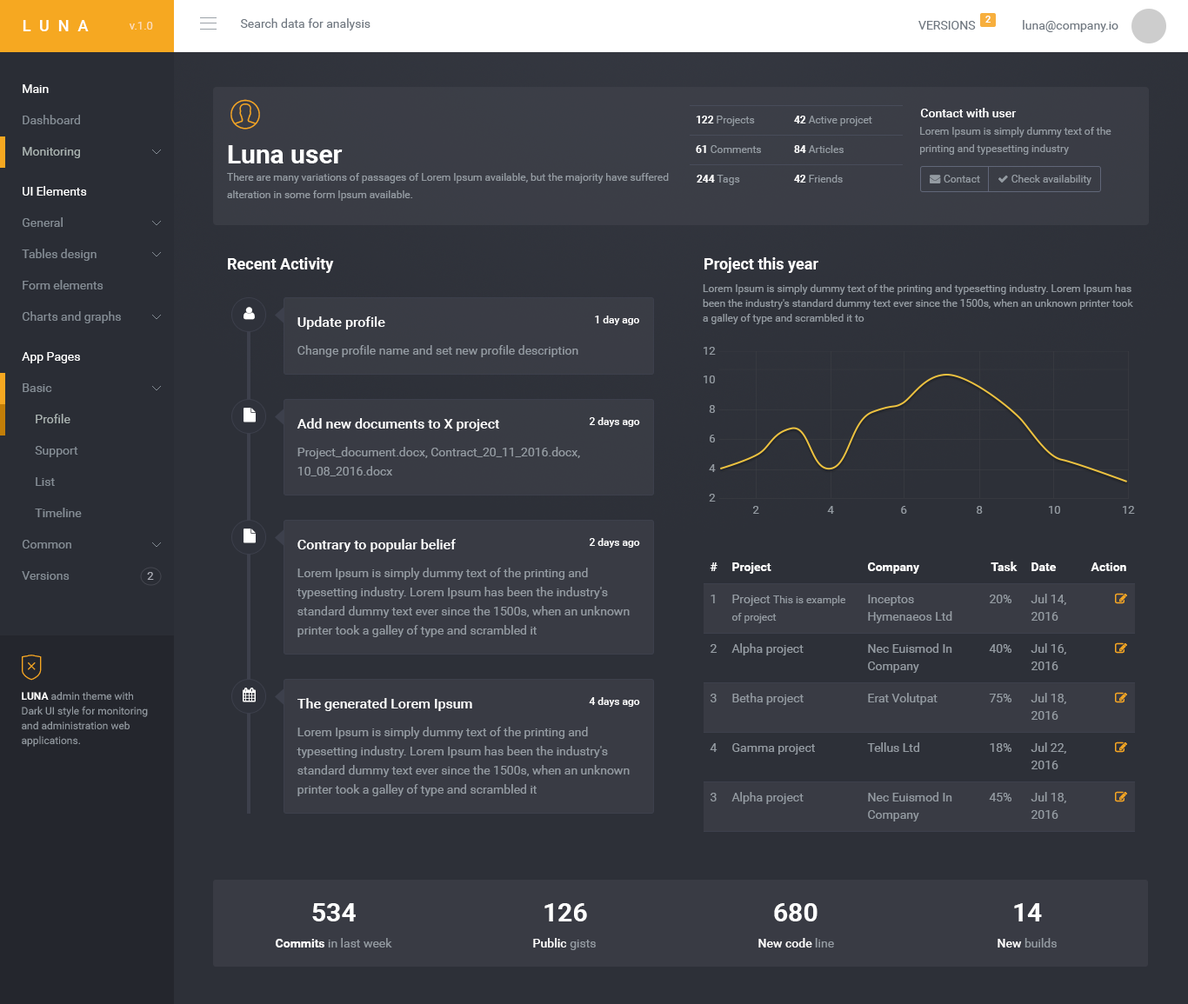
<style>
.page{position:relative;width:1188px;height:1004px;background:#2d3038}
.page>*{position:absolute;margin:0}
.t1{font:9.6px "Roboto-Bold";color:#ffffff}
.t2{font:15.7px "Roboto-Medium";letter-spacing:0.55em;color:#ffffff}
.t3{font:11.3px "Roboto-Regular";color:#fbdfbc}
.t4{font:12.2px "Roboto-Regular";color:#6f7780}
.t5{font:12.2px "Roboto-Regular";color:#ffffff}
.t6{font:12.2px "Roboto-Medium";color:#ffffff}
.t7{font:12.2px "Roboto-Regular";color:#848c94}
.t8{font:10.4px "Roboto-Regular";color:#949ba2}
.t9{font:10.4px "Roboto-Bold";color:#ffffff}
.t10{font:10.4px/17.4px "Roboto-Regular";color:#949ba2}
.t11{font:12.2px "Roboto-Regular";color:#a9b2b0}
.t12{font:26.1px "Roboto-Bold";color:#ffffff}
.t13{font:15.7px "Roboto-Bold";color:#fffefe}
.t14{font:10.4px/14.8px "Roboto-Regular";color:#949ba2}
.t15{font:13.9px "Roboto-Medium";color:#ffffff}
.t16{font:10.4px "Roboto-Medium";color:#ffffff}
.t17{font:12.2px "Roboto-Regular";color:#949ba2}
.t18{font:11.3px "Roboto-Regular";color:#949ba2}
.t19{font:12.2px/19.1px "Roboto-Regular";color:#949ba2}
.t20{font:12.2px "Roboto-Bold";color:#ffffff}
.t21{font:11.3px "Roboto-Regular";color:#aaacb5}
.t22{font:12.2px/17.4px "Roboto-Regular";color:#949ba2}
.t23{font:10.4px/14.8px "Roboto-Bold";color:#ffffff}
.t24{font:12.2px "Roboto-Bold";color:#fffefe}
.t25{font:12.2px "Roboto-Medium";color:#fffefe}
</style>
<div class="page">
<p class="t1" style="left:985px;top:16px;width:5px;height:7px">2</p>
<p class="t2" style="left:23px;top:20px;width:66px;height:11px">LUNA</p>
<p class="t3" style="left:129px;top:22px;width:24px;height:8px">v.1.0</p>
<p class="t4" style="left:240px;top:18px;width:130px;height:12px">Search data for analysis</p>
<p class="t4" style="left:918px;top:21px;width:57px;height:9px">VERSIONS</p>
<p class="t4" style="left:1022px;top:20px;width:96px;height:12px">luna@company.io</p>
<p class="t5" style="left:23px;top:84px;width:26px;height:9px">Main</p>
<p class="t6" style="left:920px;top:108px;width:96px;height:9px">Contact with user</p>
<p class="t7" style="left:23px;top:115px;width:57px;height:9px">Dashboard</p>
<p class="t8" style="left:695px;top:116px;width:60px;height:10px"><span class="t9">122 </span>Projects</p>
<p class="t8" style="left:794px;top:116px;width:78px;height:10px"><span class="t9">42 </span>Active projcet</p>
<p class="t10" style="left:920px;top:127px;width:191px;height:28px">Lorem Ipsum is simply dummy text of the printing and typesetting industry</p>
<p class="t11" style="left:23px;top:147px;width:57px;height:11px">Monitoring</p>
<p class="t12" style="left:228px;top:145px;width:115px;height:18px">Luna user</p>
<p class="t8" style="left:695px;top:145px;width:66px;height:8px"><span class="t9">61 </span>Comments</p>
<p class="t8" style="left:794px;top:145px;width:49px;height:8px"><span class="t9">84 </span>Articles</p>
<p class="t10" style="left:227px;top:173px;width:442px;height:28px">There are many variations of passages of Lorem Ipsum available, but the majority have suffered alteration in some form Ipsum available.</p>
<p class="t8" style="left:696px;top:175px;width:44px;height:10px"><span class="t9">244 </span>Tags</p>
<p class="t8" style="left:794px;top:175px;width:48px;height:8px"><span class="t9">42 </span>Friends</p>
<p class="t8" style="left:943px;top:175px;width:37px;height:8px">Contact</p>
<p class="t8" style="left:1011px;top:175px;width:80px;height:10px">Check availability</p>
<p class="t5" style="left:23px;top:186px;width:64px;height:10px">UI Elements</p>
<p class="t7" style="left:23px;top:217px;width:40px;height:10px">General</p>
<p class="t7" style="left:22px;top:249px;width:74px;height:12px">Tables design</p>
<p class="t13" style="left:228px;top:257px;width:106px;height:16px">Recent Activity</p>
<p class="t13" style="left:704px;top:257px;width:114px;height:16px">Project this year</p>
<p class="t7" style="left:23px;top:280px;width:80px;height:9px">Form elements</p>
<p class="t14" style="left:702px;top:284px;width:431px;height:40px">Lorem Ipsum is simply dummy text of the printing and typesetting industry. Lorem Ipsum has been the industry's standard dummy text ever since the 1500s, when an unknown printer took a galley of type and scrambled it to</p>
<p class="t7" style="left:22px;top:311px;width:99px;height:12px">Charts and graphs</p>
<p class="t15" style="left:297px;top:316px;width:88px;height:13px">Update profile</p>
<p class="t16" style="left:595px;top:316px;width:44px;height:9px">1 day ago</p>
<p class="t5" style="left:22px;top:352px;width:58px;height:11px">App Pages</p>
<p class="t17" style="left:297px;top:345px;width:281px;height:12px">Change profile name and set new profile description</p>
<p class="t18" style="left:703px;top:347px;width:12px;height:8px">12</p>
<p class="t18" style="left:703px;top:376px;width:12px;height:7px">10</p>
<p class="t7" style="left:23px;top:383px;width:29px;height:9px">Basic</p>
<p class="t11" style="left:36px;top:414px;width:34px;height:9px">Profile</p>
<p class="t18" style="left:709px;top:405px;width:6px;height:8px">8</p>
<p class="t15" style="left:296px;top:418px;width:203px;height:13px">Add new documents to X project</p>
<p class="t16" style="left:589px;top:417px;width:51px;height:10px">2 days ago</p>
<p class="t18" style="left:709px;top:435px;width:6px;height:8px">6</p>
<p class="t7" style="left:35px;top:446px;width:43px;height:11px">Support</p>
<p class="t19" style="left:297px;top:447px;width:283px;height:29px">Project_document.docx, Contract_20_11_2016.docx, 10_08_2016.docx</p>
<p class="t18" style="left:709px;top:464px;width:6px;height:8px">4</p>
<p class="t7" style="left:36px;top:477px;width:19px;height:9px">List</p>
<p class="t18" style="left:709px;top:494px;width:6px;height:8px">2</p>
<p class="t7" style="left:35px;top:508px;width:47px;height:9px">Timeline</p>
<p class="t18" style="left:753px;top:506px;width:6px;height:8px">2</p>
<p class="t18" style="left:827px;top:506px;width:7px;height:8px">4</p>
<p class="t18" style="left:901px;top:506px;width:6px;height:8px">6</p>
<p class="t18" style="left:976px;top:506px;width:6px;height:8px">8</p>
<p class="t18" style="left:1048px;top:506px;width:12px;height:8px">10</p>
<p class="t18" style="left:1122px;top:506px;width:13px;height:8px">12</p>
<p class="t7" style="left:22px;top:540px;width:49px;height:9px">Common</p>
<p class="t15" style="left:297px;top:539px;width:159px;height:13px">Contrary to popular belief</p>
<p class="t16" style="left:589px;top:538px;width:51px;height:10px">2 days ago</p>
<p class="t19" style="left:296px;top:568px;width:333px;height:69px">Lorem Ipsum is simply dummy text of the printing and typesetting industry. Lorem Ipsum has been the industry's standard dummy text ever since the 1500s, when an unknown printer took a galley of type and scrambled it to10_08_2016.docx</p>
<p class="t20" style="left:709px;top:562px;width:8px;height:9px">#</p>
<p class="t20" style="left:732px;top:562px;width:39px;height:12px">Project</p>
<p class="t20" style="left:868px;top:562px;width:51px;height:12px">Company</p>
<p class="t20" style="left:990px;top:562px;width:27px;height:9px">Task</p>
<p class="t20" style="left:1031px;top:562px;width:25px;height:9px">Date</p>
<p class="t20" style="left:1090px;top:562px;width:36px;height:9px">Action</p>
<p class="t7" style="left:22px;top:571px;width:48px;height:9px">Versions</p>
<p class="t21" style="left:147px;top:572px;width:7px;height:8px">2</p>
<p class="t22" style="left:1030px;top:594px;width:36px;height:27px">Jul 14, 2016</p>
<p class="t17" style="left:710px;top:595px;width:5px;height:8px">1</p>
<p class="t10" style="left:731px;top:595px;width:114px;height:28px"><span class="t22">Project </span>This is example of project</p>
<p class="t22" style="left:868px;top:595px;width:84px;height:28px">Inceptos Hymenaeos Ltd</p>
<p class="t17" style="left:989px;top:595px;width:22px;height:8px">20%</p>
<p class="t17" style="left:710px;top:644px;width:6px;height:9px">2</p>
<p class="t17" style="left:731px;top:643px;width:72px;height:12px">Alpha project</p>
<p class="t22" style="left:868px;top:643px;width:84px;height:30px">Nec Euismod In Company</p>
<p class="t17" style="left:988px;top:644px;width:23px;height:9px">40%</p>
<p class="t22" style="left:1030px;top:643px;width:36px;height:27px">Jul 16, 2016</p>
<p class="t14" style="left:22px;top:692px;width:126px;height:55px"><span class="t23">LUNA </span>admin theme with Dark UI style for monitoring and administration web applications.</p>
<p class="t15" style="left:297px;top:698px;width:175px;height:13px">The generated Lorem Ipsum</p>
<p class="t16" style="left:589px;top:697px;width:51px;height:10px">4 days ago</p>
<p class="t17" style="left:710px;top:694px;width:6px;height:8px">3</p>
<p class="t17" style="left:732px;top:693px;width:71px;height:12px">Betha project</p>
<p class="t17" style="left:868px;top:693px;width:69px;height:12px">Erat Volutpat</p>
<p class="t17" style="left:988px;top:694px;width:23px;height:8px">75%</p>
<p class="t22" style="left:1030px;top:693px;width:36px;height:27px">Jul 18, 2016</p>
<p class="t19" style="left:296px;top:727px;width:333px;height:69px">Lorem Ipsum is simply dummy text of the printing and typesetting industry. Lorem Ipsum has been the industry's standard dummy text ever since the 1500s, when an unknown printer took a galley of type and scrambled it to10_08_2016.docx</p>
<p class="t17" style="left:709px;top:743px;width:8px;height:9px">4</p>
<p class="t17" style="left:732px;top:743px;width:83px;height:12px">Gamma project</p>
<p class="t17" style="left:867px;top:742px;width:52px;height:10px">Tellus Ltd</p>
<p class="t17" style="left:989px;top:743px;width:22px;height:9px">18%</p>
<p class="t22" style="left:1030px;top:742px;width:36px;height:27px">Jul 22, 2016</p>
<p class="t17" style="left:710px;top:793px;width:6px;height:9px">3</p>
<p class="t17" style="left:731px;top:792px;width:72px;height:12px">Alpha project</p>
<p class="t22" style="left:868px;top:792px;width:84px;height:30px">Nec Euismod In Company</p>
<p class="t17" style="left:988px;top:793px;width:23px;height:9px">45%</p>
<p class="t22" style="left:1030px;top:792px;width:36px;height:27px">Jul 18, 2016</p>
<p class="t12" style="left:312px;top:903px;width:44px;height:19px">534</p>
<p class="t12" style="left:544px;top:903px;width:43px;height:19px">126</p>
<p class="t12" style="left:774px;top:903px;width:43px;height:19px">680</p>
<p class="t12" style="left:1014px;top:903px;width:27px;height:19px">14</p>
<p class="t17" style="left:276px;top:938px;width:116px;height:10px"><span class="t24">Commits</span> in last week</p>
<p class="t25" style="left:533px;top:938px;width:63px;height:12px">Public<span class="t17"> gists</span></p>
<p class="t25" style="left:758px;top:938px;width:76px;height:10px">New code<span class="t17"> line</span></p>
<p class="t17" style="left:997px;top:938px;width:59px;height:10px"><span class="t25">New </span>builds</p>
</div>
